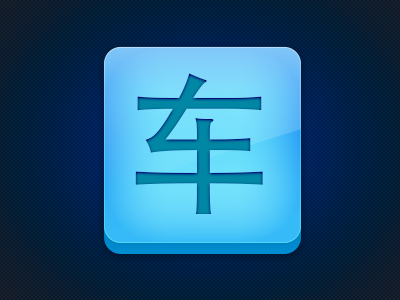
<style>
.page{position:relative;width:400px;height:300px}
.page>*{position:absolute;margin:0}
.t1{font:151.3px "AdobeHeitiStd-Regular";color:#0187a4}
</style>
<div class="page">
<p class="t1" style="left:135px;top:73px;width:128px;height:141px">车</p>
</div>
